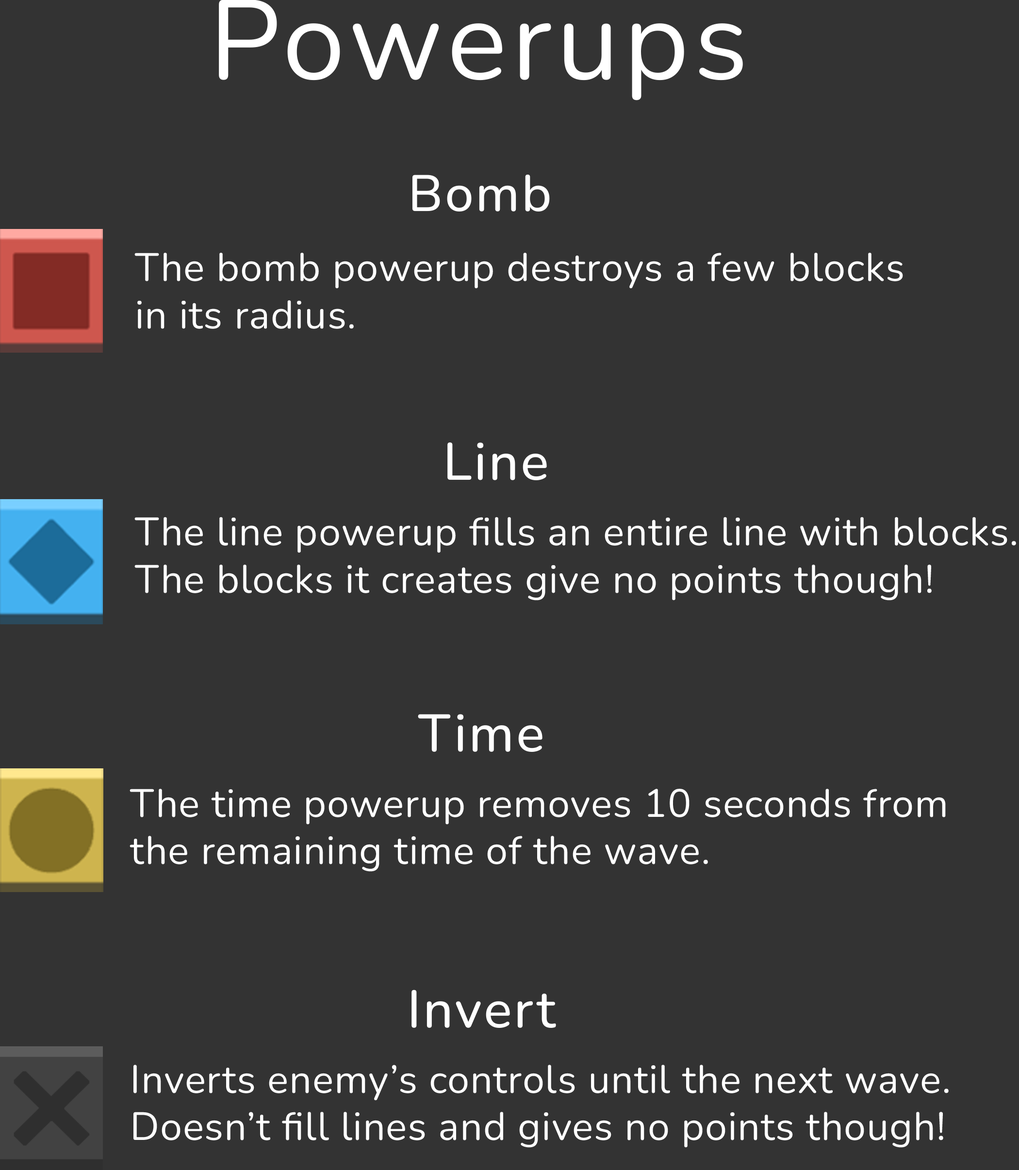
<style>
.page{position:relative;width:1019px;height:1170px;background:#333333}
.page>*{position:absolute;margin:0}
.t1{font:112.5px "Nunito-Regular";letter-spacing:0.04em;color:#ffffff}
.t2{font:51.1px "Nunito-Medium";letter-spacing:0.04em;color:#ffffff}
.t3{font:39.5px "Nunito-Regular";letter-spacing:0.02em;color:#ffffff}
.t4{font:52.6px "Nunito-Medium";letter-spacing:0.04em;color:#ffffff}
.t5{font:39.3px "Nunito-Regular";letter-spacing:0.02em;color:#ffffff}
</style>
<div class="page">
<p class="t1" style="left:219px;top:0px;width:524px;height:100px">Powerups</p>
<p class="t2" style="left:412px;top:174px;width:138px;height:38px">Bomb</p>
<p class="t3" style="left:134px;top:253px;width:769px;height:76px">The bomb powerup destroys a few blocks<br>in its radius.</p>
<p class="t4" style="left:447px;top:443px;width:100px;height:37px">Line</p>
<p class="t3" style="left:134px;top:517px;width:882px;height:84px">The line powerup fills an entire line with blocks.<br>The blocks it creates give no points though!</p>
<p class="t4" style="left:418px;top:714px;width:124px;height:38px">Time</p>
<p class="t5" style="left:130px;top:789px;width:816px;height:83px">The time powerup removes 10 seconds from<br>the remaining time of the wave.</p>
<p class="t4" style="left:411px;top:990px;width:145px;height:38px">Invert</p>
<p class="t5" style="left:133px;top:1065px;width:816px;height:83px">Inverts enemy’s controls until the next wave.<br>Doesn’t fill lines and gives no points though!</p>
</div>
